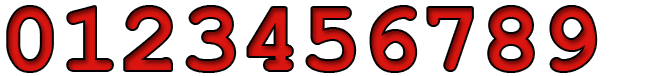
<style>
.page{position:relative;width:650px;height:76px;background:#ffffff}
.page>*{position:absolute;margin:0}
.t1{font:100px "CourierNewPS-BoldMT"}
</style>
<div class="page">
<p class="t1" style="left:8px;top:7px;width:588px;height:64px">0123456789</p>
</div>
